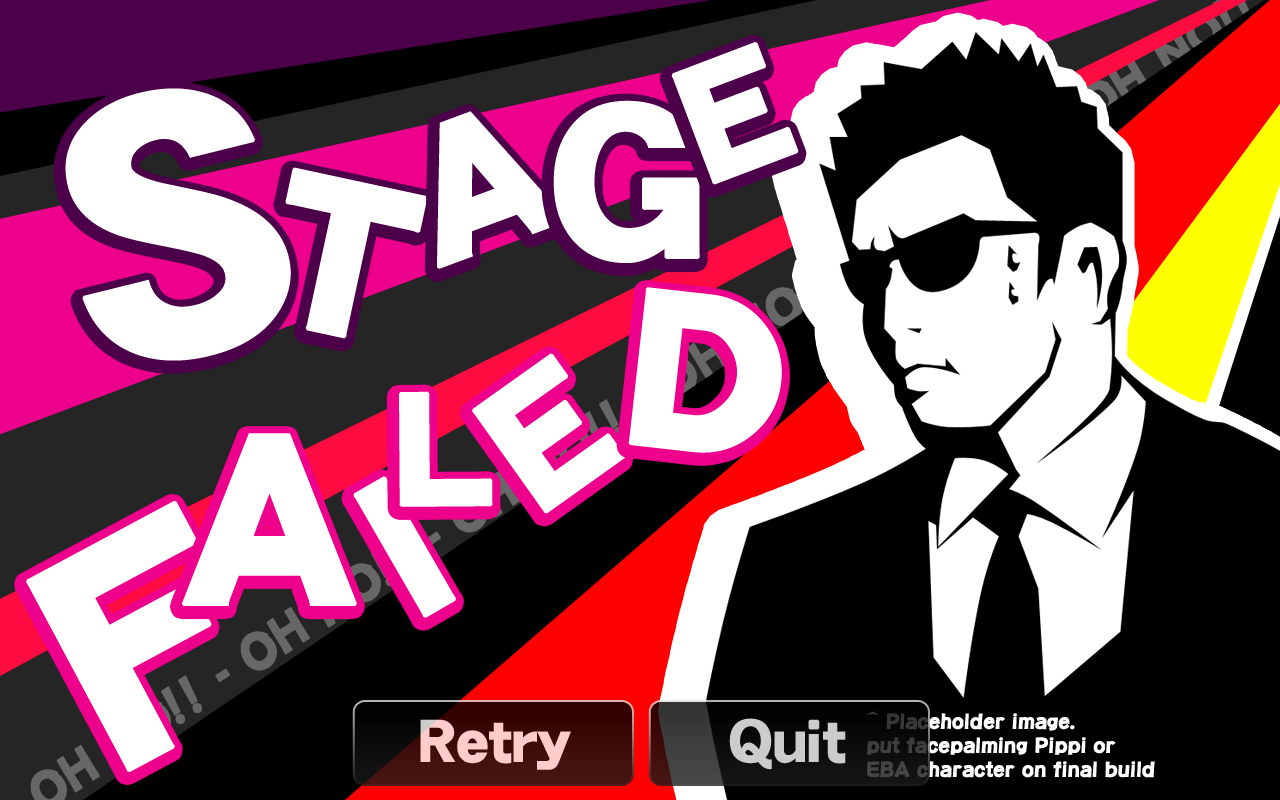
<style>
.page{position:relative;width:1280px;height:800px;background:#000000}
.page>*{position:absolute;margin:0}
.t1{font:163.6px "DFGothic-EB-WING-RKSJ-H";color:#ffffff;font-weight:bold}
.t2{font:361.7px "DFGothic-EB-WING-RKSJ-H";color:#ffffff;font-weight:bold}
.t3{font:213.4px "DFGothic-EB-WING-RKSJ-H";color:#ffffff;font-weight:bold}
.t4{font:189.1px "DFGothic-EB-WING-RKSJ-H";color:#ffffff;font-weight:bold}
.t5{font:217px "DFGothic-EB-WING-RKSJ-H";color:#ffffff;font-weight:bold}
.t6{font:220.2px "DFGothic-EB-WING-RKSJ-H";color:#ffffff;font-weight:bold;scale:1.04 1}
.t7{font:176.8px "DFGothic-EB-WING-RKSJ-H";color:#ffffff;font-weight:bold}
.t8{font:158px "DFGothic-EB-WING-RKSJ-H";color:#ffffff;font-weight:bold}
.t9{font:240px "DFGothic-EB-WING-RKSJ-H";color:#ffffff;font-weight:bold}
.t10{font:198.6px "DFGothic-EB-WING-RKSJ-H";color:#ffffff;font-weight:bold}
.t11{font:304.4px "DFGothic-EB-WING-RKSJ-H";color:#ffffff;font-weight:bold}
.t12{font:20px "DFPOP1-W12-WING-RKSJ-H";color:#ffffff;font-weight:bold}
.t13{font:60px "DFGothic-EB-WING-RKSJ-H";color:#ffcccc}
.t14{font:60px "DFGothic-EB-WING-RKSJ-H";color:#cccccc}
</style>
<div class="page">
<p class="t1" style="left:671px;top:42px;width:128px;height:143px;rotate:-21deg">E</p>
<p class="t2" style="left:65px;top:88px;width:226px;height:273px;rotate:-14deg">S</p>
<p class="t3" style="left:553px;top:100px;width:147px;height:163px">G</p>
<p class="t4" style="left:437px;top:111px;width:130px;height:158px;rotate:-20deg">A</p>
<p class="t5" style="left:285px;top:167px;width:143px;height:172px;rotate:12deg">T</p>
<p class="t6" style="left:628px;top:287px;width:154px;height:166px;rotate:6deg">D</p>
<p class="t7" style="left:472px;top:353px;width:153px;height:161px;rotate:-35deg">E</p>
<p class="t8" style="left:398px;top:391px;width:95px;height:116px">L</p>
<p class="t9" style="left:182px;top:433px;width:175px;height:173px">A</p>
<p class="t10" style="left:353px;top:476px;width:103px;height:142px;rotate:-30deg">I</p>
<p class="t11" style="left:26px;top:501px;width:186px;height:271px;rotate:-28deg">F</p>
<p class="t12" style="left:866px;top:711px;width:289px;height:67px">^ Placeholder image.<br>put facepalming Pippi or<br>EBA character on final build</p>
<p class="t13" style="left:420px;top:719px;width:151px;height:51px">Retry</p>
<p class="t14" style="left:729px;top:718px;width:117px;height:52px">Quit</p>
</div>
